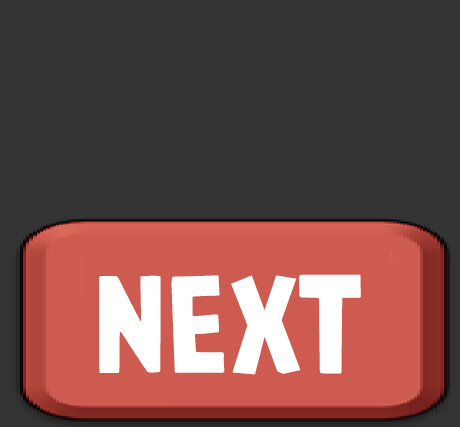
<style>
.page{position:relative;width:460px;height:427px;background:#333333}
.page>*{position:absolute;margin:0}
.t1{font:139.2px "Fanta-Regular";color:#ffffff}
</style>
<div class="page">
<p class="t1" style="left:99px;top:274px;width:262px;height:101px">next</p>
</div>
